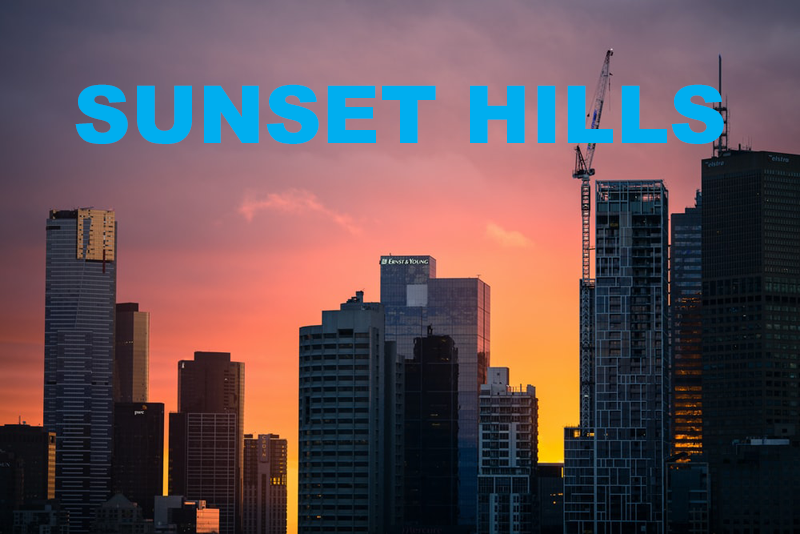
<style>
.page{position:relative;width:800px;height:534px}
.page>*{position:absolute;margin:0}
.t1{font:80px "Arial-Black";color:#00aeef}
</style>
<div class="page">
<p class="t1" style="left:75px;top:84px;width:649px;height:60px">SUNSET HILLS</p>
</div>
